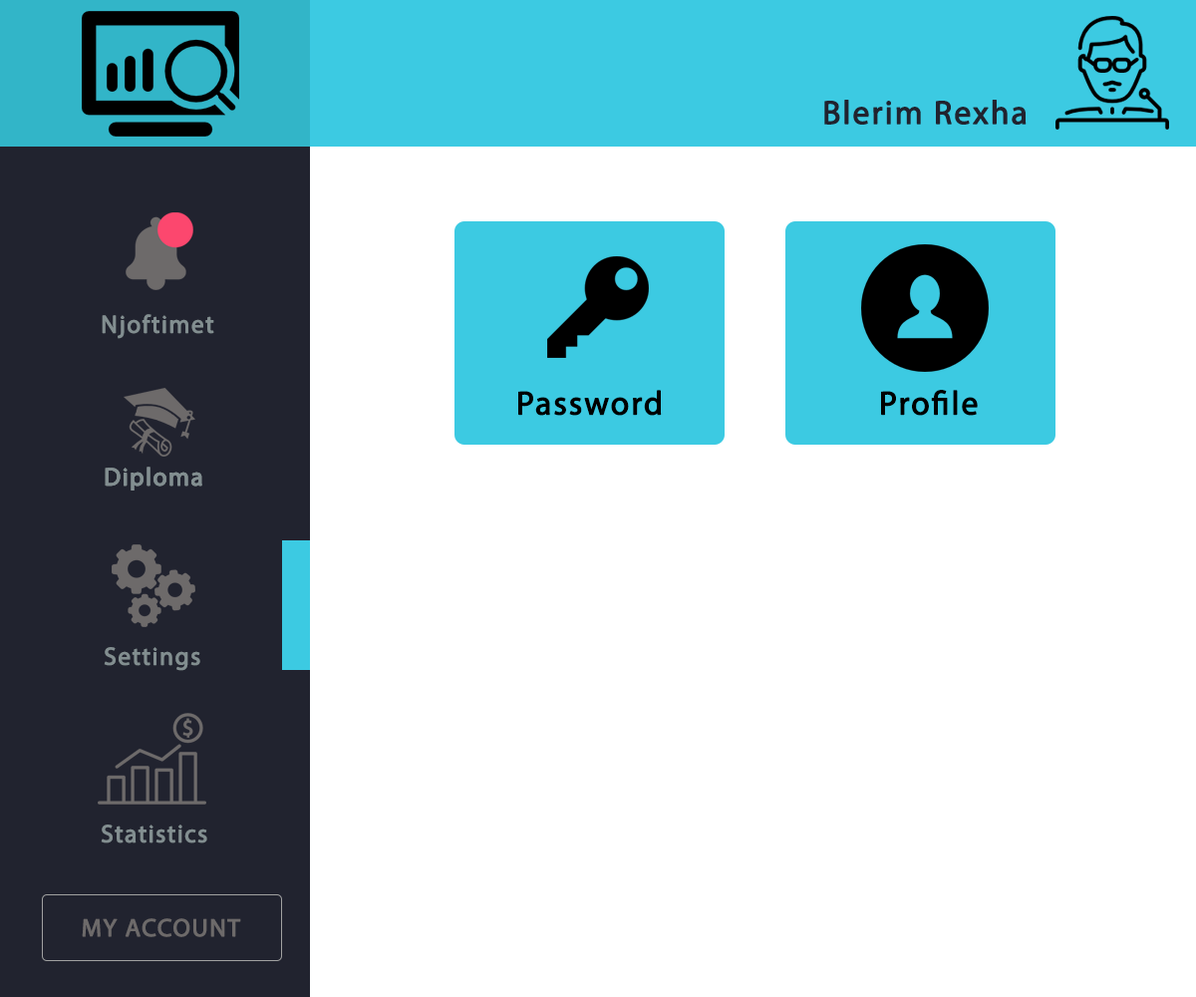
<style>
.page{position:relative;width:1196px;height:997px;background:#ffffff}
.page>*{position:absolute;margin:0}
.t1{font:33.2px "MyriadPro-Regular";letter-spacing:0.04em;color:#21232f;font-weight:bold}
.t2{font:24.9px "MyriadPro-Regular";letter-spacing:0.04em;color:#828e90;font-weight:bold}
.t3{font:33.2px "MyriadPro-Regular";letter-spacing:0.04em;color:#000000;font-weight:bold}
.t4{font:24.9px "MyriadPro-Regular";letter-spacing:0.04em;color:#6d6a6a;font-weight:bold}
</style>
<div class="page">
<p class="t1" style="left:824px;top:100px;width:203px;height:25px">Blerim Rexha</p>
<p class="t2" style="left:102px;top:314px;width:112px;height:25px">Njoftimet</p>
<p class="t3" style="left:518px;top:390px;width:144px;height:26px">Password</p>
<p class="t3" style="left:881px;top:390px;width:97px;height:26px">Profile</p>
<p class="t2" style="left:105px;top:467px;width:97px;height:23px">Diploma</p>
<p class="t2" style="left:105px;top:467px;width:97px;height:23px">Diploma</p>
<p class="t2" style="left:104px;top:647px;width:96px;height:24px">Settings</p>
<p class="t2" style="left:101px;top:824px;width:106px;height:19px">Statistics</p>
<p class="t4" style="left:82px;top:918px;width:159px;height:19px">MY ACCOUNT</p>
</div>
